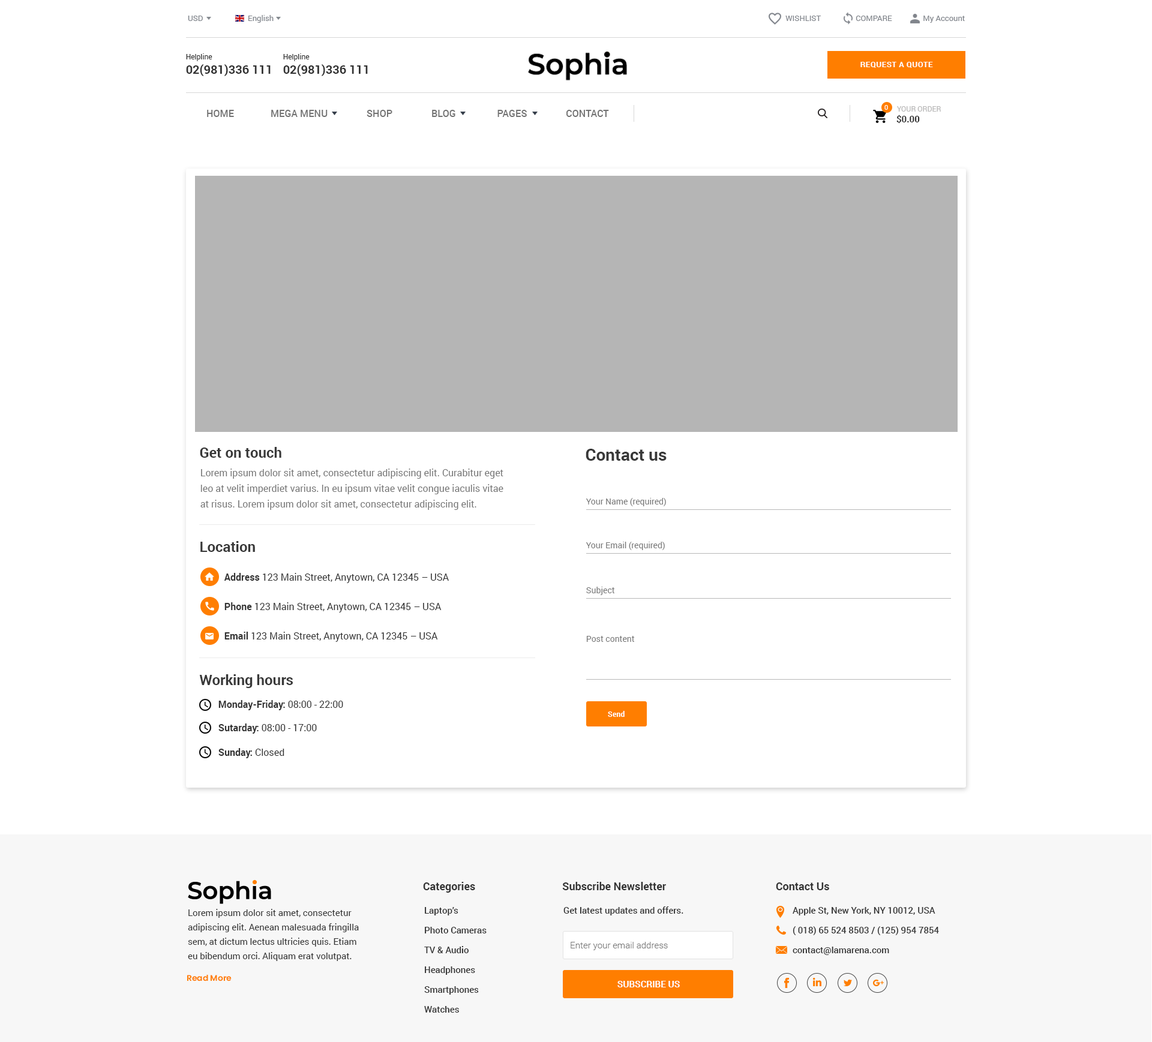
<style>
.page{position:relative;width:1152px;height:1042px;background:#ffffff}
.page>*{position:absolute;margin:0}
.t1{font:7.8px "Roboto-Regular";color:#81858c}
.t2{font:12px "Roboto-Bold";color:#333333}
.t3{font:7.2px "Roboto-Regular";color:#333333}
.t4{font:7.8px "Roboto-Bold";letter-spacing:0.04em;color:#ffffff}
.t5{font:9.6px "Roboto-Medium";color:#737373}
.t6{font:6.6px "Roboto-Regular";color:#ffffff}
.t7{font:7.2px "Roboto-Regular";color:#b8b7b7}
.t8{font:9px "Roboto-Bold";color:#333333}
.t9{font:14.4px "Roboto-Bold";color:#383838}
.t10{font:16.8px "Roboto-Bold";color:#383838}
.t11{font:9.6px/15.6px "Roboto-Regular";color:#777777}
.t12{font:8.4px "Roboto-Regular";color:#777777}
.t13{font:9.6px "Roboto-Regular";color:#333333}
.t14{font:9.6px "Roboto-Bold";color:#333333}
.t15{font:7.2px "Roboto-Bold";color:#ffffff;scale:1.03 1}
.t16{font:10.8px "Roboto-Bold";color:#333333}
.t17{font:9px/14.4px "Roboto-Regular";color:#333333}
.t18{font:9px/19.8px "Roboto-Medium";color:#333333}
.t19{font:9px "Roboto-Medium";color:#333333}
.t20{font:9px "Roboto-Light";color:#777777}
.t21{font:8.1px "Poppins-SemiBold";color:#ff7e00}
.t22{font:9px "Roboto-Bold";color:#ffffff}
</style>
<div class="page">
<p class="t1" style="left:188px;top:16px;width:15px;height:5px">USD</p>
<p class="t1" style="left:248px;top:15px;width:26px;height:8px">English</p>
<p class="t1" style="left:785px;top:16px;width:180px;height:7px">WISHLIST                  COMPARE                My Account</p>
<p class="t2" style="left:186px;top:53px;width:85px;height:23px"><span class="t3">Helpline<br></span>02(981)336 111</p>
<p class="t2" style="left:283px;top:53px;width:85px;height:23px"><span class="t3">Helpline<br></span>02(981)336 111</p>
<p class="t4" style="left:860px;top:62px;width:73px;height:6px">REQUEST A QUOTE</p>
<p class="t5" style="left:207px;top:110px;width:402px;height:7px">HOME               MEGA MENU                SHOP                BLOG                 PAGES                CONTACT</p>
<p class="t6" style="left:884px;top:105px;width:4px;height:5px">0</p>
<p class="t7" style="left:897px;top:106px;width:44px;height:6px">YOUR ORDER</p>
<p class="t8" style="left:896px;top:115px;width:24px;height:9px">$0.00</p>
<p class="t9" style="left:200px;top:447px;width:81px;height:11px">Get on touch</p>
<p class="t10" style="left:586px;top:449px;width:81px;height:12px">Contact us</p>
<p class="t11" style="left:200px;top:469px;width:303px;height:41px">Lorem ipsum dolor sit amet, consectetur adipiscing elit. Curabitur eget leo at velit imperdiet varius. In eu ipsum vitae velit congue iaculis vitae at risus. Lorem ipsum dolor sit amet, consectetur adipiscing elit.</p>
<p class="t12" style="left:586px;top:498px;width:80px;height:8px">Your Name (required)</p>
<p class="t9" style="left:200px;top:541px;width:55px;height:11px">Location</p>
<p class="t12" style="left:586px;top:542px;width:79px;height:8px">Your Email (required)</p>
<p class="t13" style="left:224px;top:573px;width:225px;height:10px"><span class="t14">Address </span>123 Main Street, Anytown, CA 12345 – USA</p>
<p class="t12" style="left:586px;top:587px;width:28px;height:8px">Subject</p>
<p class="t13" style="left:224px;top:602px;width:218px;height:11px"><span class="t14">Phone </span>123 Main Street, Anytown, CA 12345 – USA</p>
<p class="t13" style="left:224px;top:632px;width:214px;height:10px"><span class="t14">Email </span>123 Main Street, Anytown, CA 12345 – USA</p>
<p class="t12" style="left:586px;top:636px;width:48px;height:6px">Post content</p>
<p class="t9" style="left:199px;top:674px;width:94px;height:14px">Working hours</p>
<p class="t14" style="left:218px;top:700px;width:125px;height:10px">Monday-Friday: <span class="t13">08:00 - 22:00</span></p>
<p class="t15" style="left:608px;top:711px;width:17px;height:6px">Send</p>
<p class="t13" style="left:218px;top:724px;width:99px;height:10px"><span class="t14">Sutarday: </span>08:00 - 17:00</p>
<p class="t14" style="left:218px;top:748px;width:66px;height:10px">Sunday: <span class="t13">Closed</span></p>
<p class="t16" style="left:423px;top:882px;width:52px;height:11px">Categories</p>
<p class="t16" style="left:562px;top:882px;width:104px;height:8px">Subscribe Newsletter</p>
<p class="t16" style="left:776px;top:883px;width:53px;height:7px">Contact Us</p>
<p class="t17" style="left:188px;top:909px;width:171px;height:52px">Lorem ipsum dolor sit amet, consectetur adipiscing elit. Aenean malesuada fringilla sem, at dictum lectus ultricies quis. Etiam eu bibendum orci. Aliquam erat volutpat.</p>
<p class="t18" style="left:424px;top:907px;width:63px;height:106px">Laptop’s<br>Photo Cameras<br>TV &amp; Audio<br>Headphones<br>Smartphones<br>Watches</p>
<p class="t19" style="left:563px;top:907px;width:120px;height:9px">Get latest updates and offers.</p>
<p class="t18" style="left:793px;top:907px;width:146px;height:48px">Apple St, New York, NY 10012, USA<br>( 018) 65 524 8503 / (125) 954 7854<br>contact@lamarena.com</p>
<p class="t20" style="left:571px;top:942px;width:97px;height:8px">Enter your email address</p>
<p class="t21" style="left:187px;top:974px;width:45px;height:8px">Read More</p>
<p class="t22" style="left:617px;top:981px;width:63px;height:7px">SUBSCRIBE US</p>
</div>
